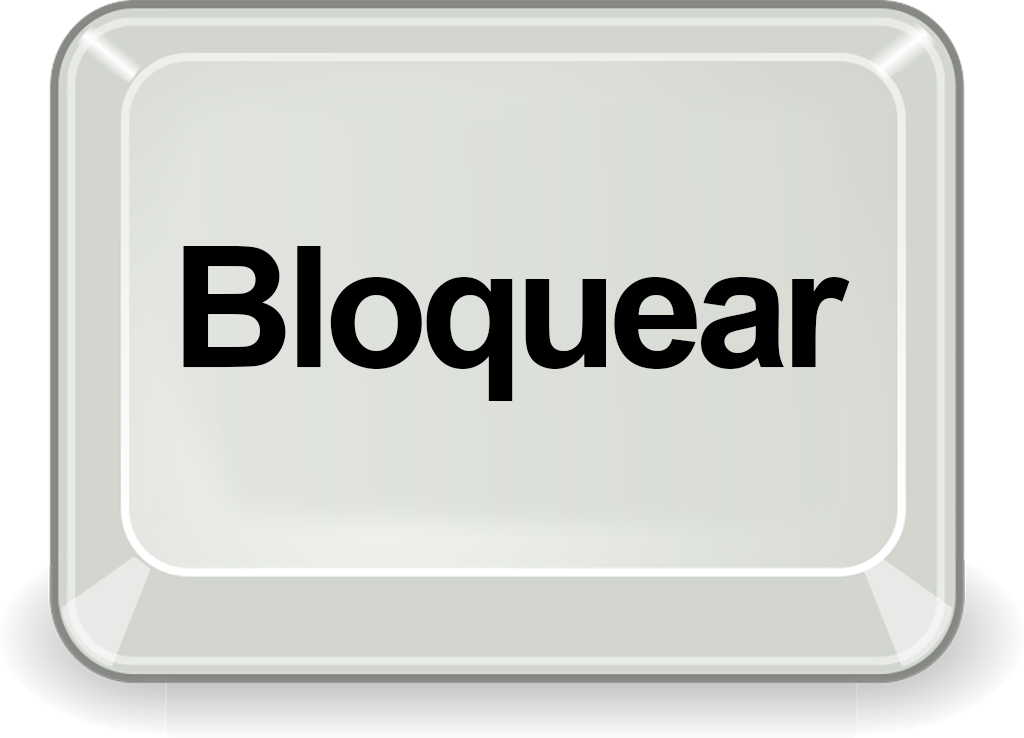
<style>
.page{position:relative;width:1024px;height:738px}
.page>*{position:absolute;margin:0}
.t1{font:169.3px "Arial-BoldMT";letter-spacing:-0.05em;color:#000000}
</style>
<div class="page">
<p class="t1" style="left:183px;top:246px;width:667px;height:155px">Bloquear</p>
</div>
